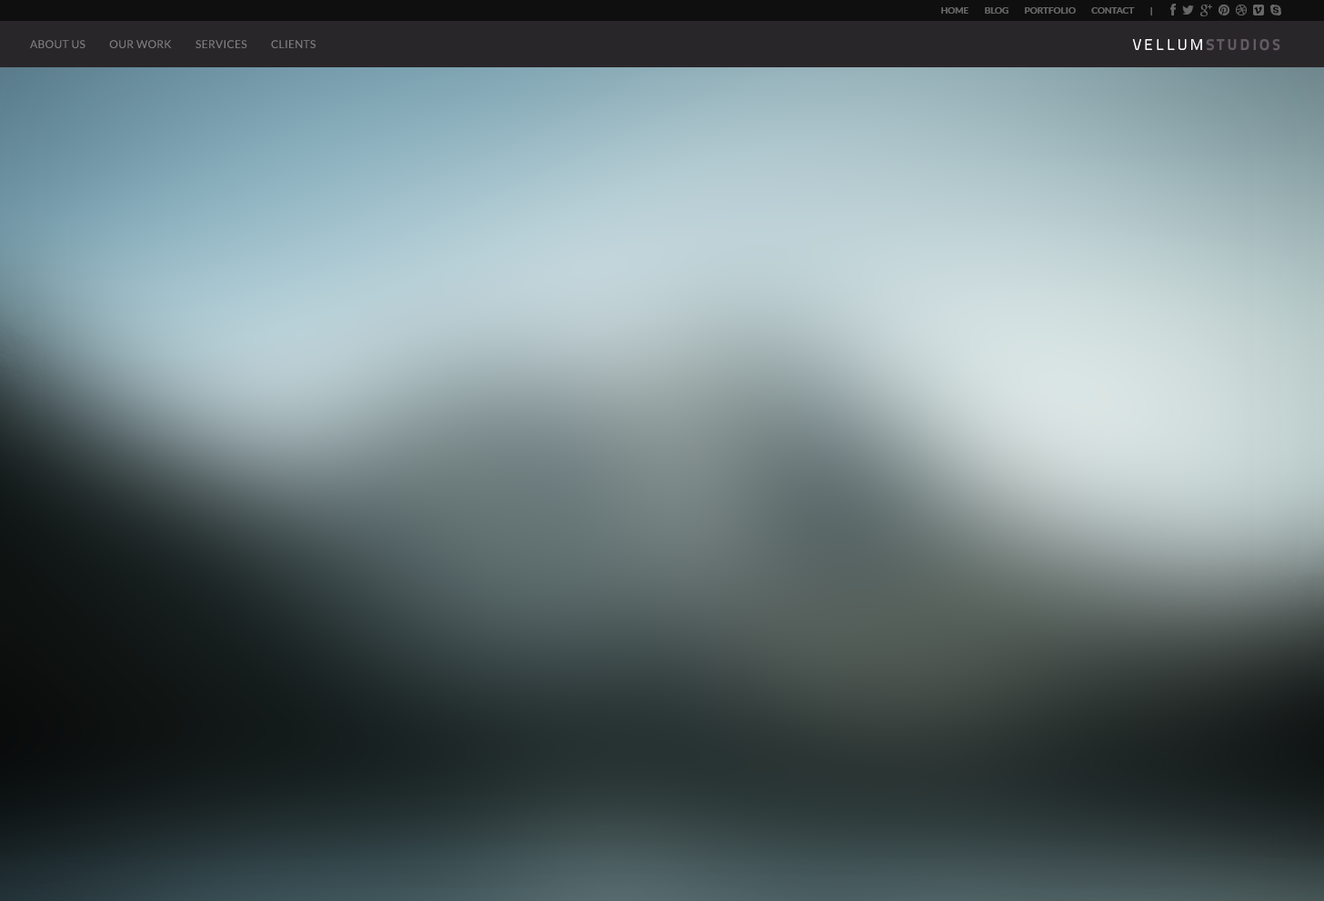
<style>
.page{position:relative;width:1324px;height:901px}
.page>*{position:absolute;margin:0}
.t1{font:9.1px "Lato-Bold";color:#686768;text-transform:uppercase}
.t2{font:10.9px "Lato-Regular";letter-spacing:0.025em;color:#818081;text-transform:uppercase}
.t3{font:15.5px "TitilliumText22L-XBold";letter-spacing:0.18em;color:#615b61;text-transform:uppercase}
.t4{font:15.5px "TitilliumText22L-Light";letter-spacing:0.18em;color:#ffffff;text-transform:uppercase}
</style>
<div class="page">
<p class="t1" style="left:941px;top:7px;width:211px;height:8px">Home         Blog         Portfolio         Contact         |</p>
<p class="t2" style="left:30px;top:40px;width:285px;height:8px">About Us          Our Work          Services          Clients</p>
<p class="t3" style="left:1132px;top:39px;width:148px;height:12px"><span class="t4">Vellum</span>Studios</p>
</div>
